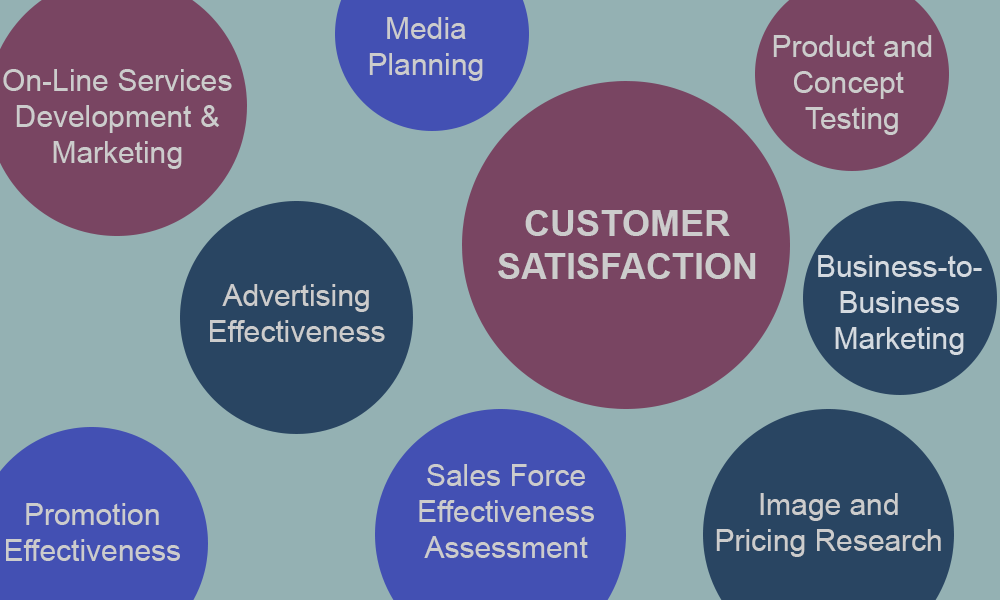
<style>
.page{position:relative;width:1000px;height:600px;background:#94b1b3}
.page>*{position:absolute;margin:0}
.t1{font:30px "ArialMT";color:#cccccc}
.t2{font:36px "Arial-BoldMT";color:#cccccc}
</style>
<div class="page">
<p class="t1" style="left:369px;top:17px;width:114px;height:64px;text-align:center">Media<br>Planning</p>
<p class="t1" style="left:773px;top:35px;width:159px;height:100px;text-align:center">Product and<br>Concept <br>Testing</p>
<p class="t1" style="left:3px;top:69px;width:229px;height:100px;text-align:center">On-Line Services<br>Development &amp;<br>Marketing</p>
<p class="t2" style="left:498px;top:210px;width:258px;height:69px;text-align:center">CUSTOMER<br>SATISFACTION</p>
<p class="t1" style="left:818px;top:255px;width:164px;height:100px;text-align:center">Business-to-<br>Business<br>Marketing</p>
<p class="t1" style="left:210px;top:284px;width:175px;height:58px;text-align:center">Advertising<br>Effectiveness</p>
<p class="t1" style="left:419px;top:464px;width:175px;height:94px;text-align:center">Sales Force<br>Effectiveness<br>Assessment</p>
<p class="t1" style="left:716px;top:493px;width:225px;height:64px;text-align:center">Image and<br>Pricing Research</p>
<p class="t1" style="left:6px;top:503px;width:174px;height:58px;text-align:center">Promotion<br>Effectiveness</p>
</div>
